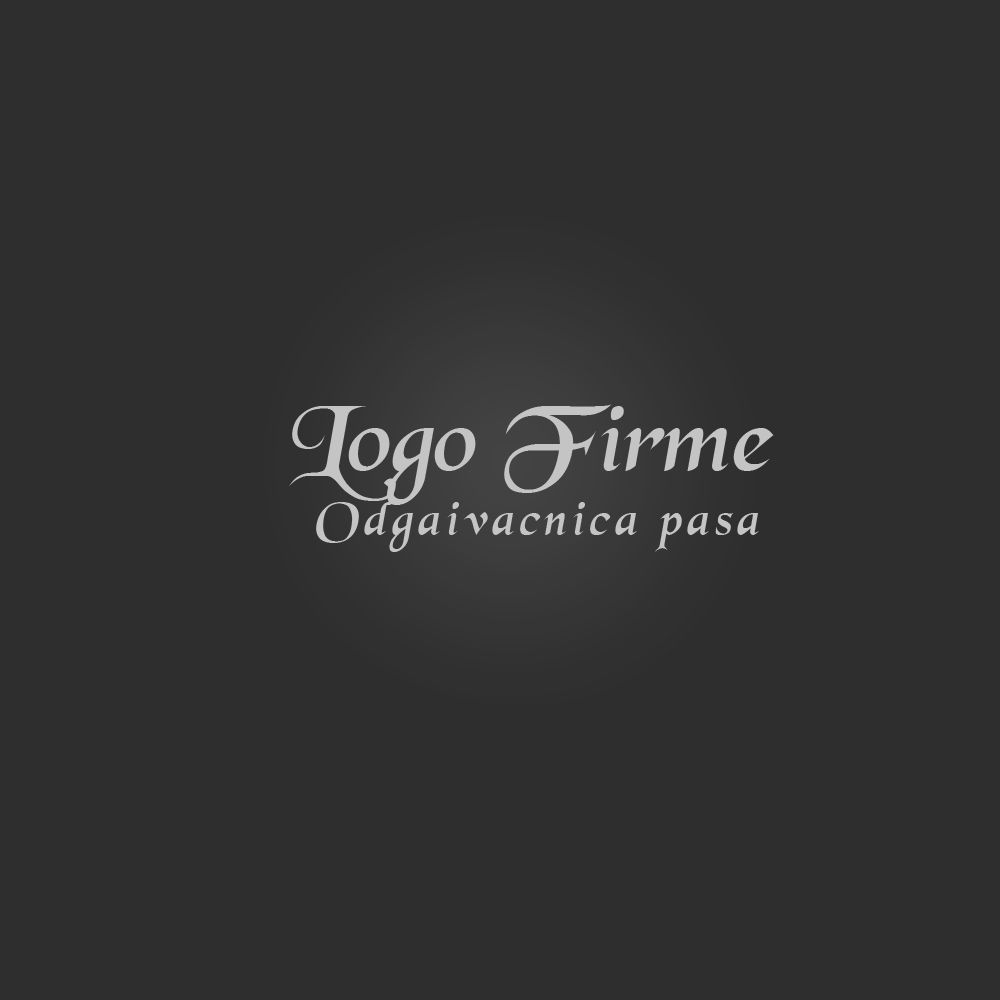
<style>
.page{position:relative;width:1000px;height:1000px;background:#2f2e2e}
.page>*{position:absolute;margin:0}
.t1{font:100px "BlackChancery";color:#c5c4c4;font-style:italic}
.t2{font:50px "BlackChancery";letter-spacing:0.1em;color:#c5c4c4;font-style:italic}
</style>
<div class="page">
<p class="t1" style="left:289px;top:404px;width:485px;height:101px">Logo Firme</p>
<p class="t2" style="left:316px;top:502px;width:443px;height:50px">Odgaivacnica pasa</p>
</div>
